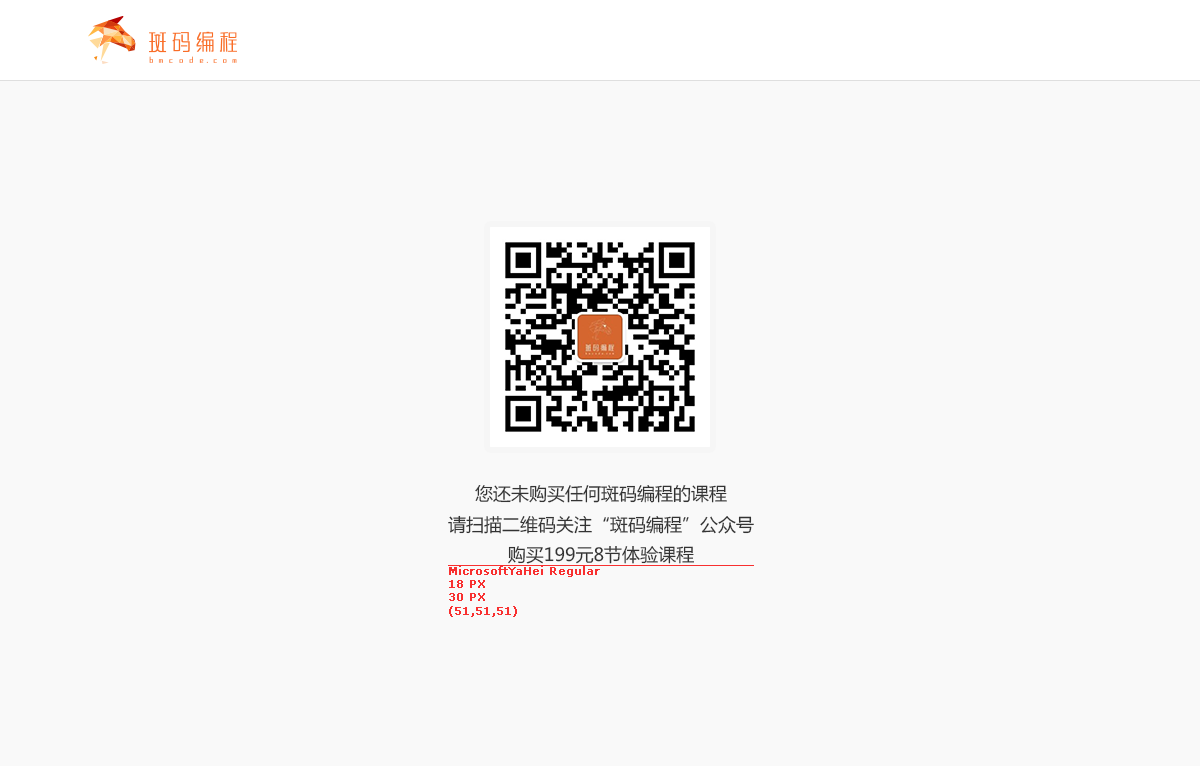
<style>
.page{position:relative;width:1200px;height:768px;background:#f9f9f9}
.page>*{position:absolute;margin:0}
.t1{font:18px/30px "MicrosoftYaHei";color:#333333}
.t2{font:11px "Verdana";color:#f83030;font-weight:bold}
</style>
<div class="page">
<p class="t1" style="left:448px;top:485px;width:306px;height:79px;text-align:center">您还未购买任何斑码编程的课程<br>请扫描二维码关注“斑码编程”公众号购买199元8节体验课程</p>
<p class="t2" style="left:449px;top:566px;width:151px;height:51px">MicrosoftYaHei Regular<br>18 PX<br>30 PX<br>(51,51,51)</p>
</div>
